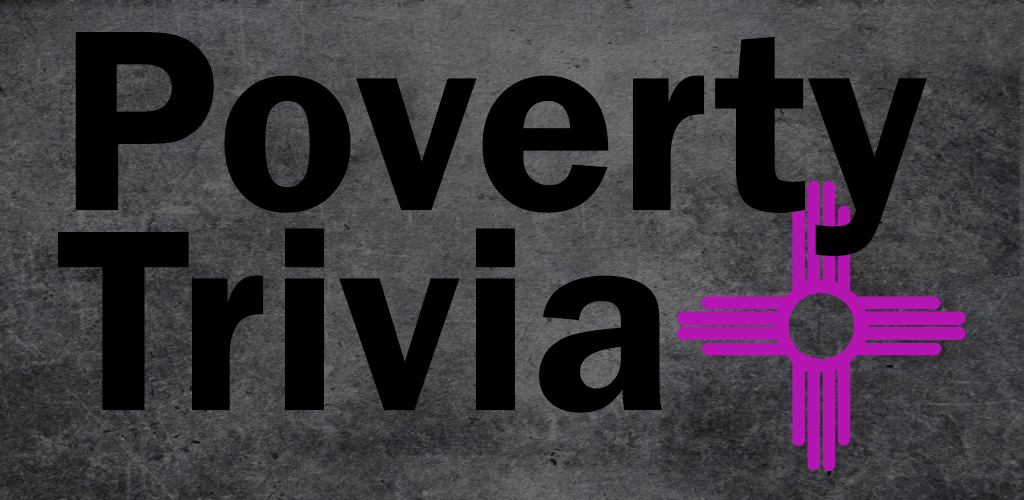
<style>
.page{position:relative;width:1024px;height:500px;background:#000000}
.page>*{position:absolute;margin:0}
.t1{font:267.1px/200.4px "FranklinGothic-Demi";color:#000000}
</style>
<div class="page">
<p class="t1" style="left:58px;top:32px;width:869px;height:381px">Poverty<br>Trivia</p>
</div>
